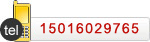
<style>
.page{position:relative;width:150px;height:42px;background:#ffffff}
.page>*{position:absolute;margin:0}
.t1{font:14px "ArialMT";letter-spacing:0.1em;color:#c1100a}
</style>
<div class="page">
<p class="t1" style="left:40px;top:23px;width:99px;height:11px">15016029765</p>
</div>
